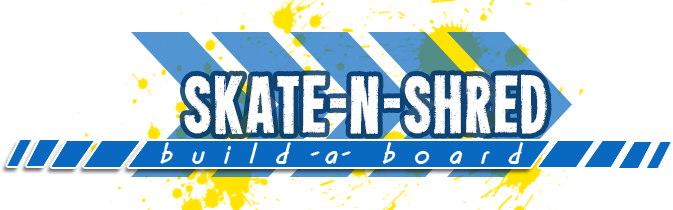
<style>
.page{position:relative;width:673px;height:210px;background:#ffffff}
.page>*{position:absolute;margin:0}
.t1{font:72px "Heavyweight";color:#ffffff}
.t2{font:24px "CountryBlueprint";letter-spacing:0.86em;color:#ffffff}
.t3{font:24px "CountryBlueprint";letter-spacing:0.2em;color:#ffffff}
</style>
<div class="page">
<p class="t1" style="left:184px;top:74px;width:363px;height:61px">SKATE-N-SHRED</p>
<p class="t2" style="left:161px;top:143px;width:362px;height:20px">build<span class="t3">-a-</span> board</p>
</div>
